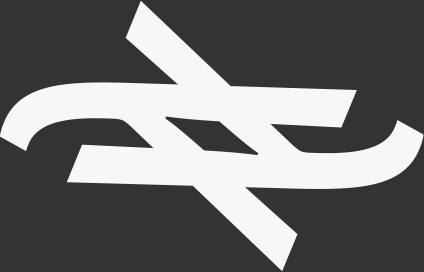
<style>
.page{position:relative;width:424px;height:272px;background:#333333}
.page>*{position:absolute;margin:0}
.t1{font:435.4px "MyriadPro-Regular";color:#f7f7f7}
</style>
<div class="page">
<p class="t1" style="left:66px;top:0px;width:358px;height:189px;rotate:112deg">λ</p>
<p class="t1" style="left:0px;top:82px;width:357px;height:190px;rotate:-68deg">λ</p>
</div>
